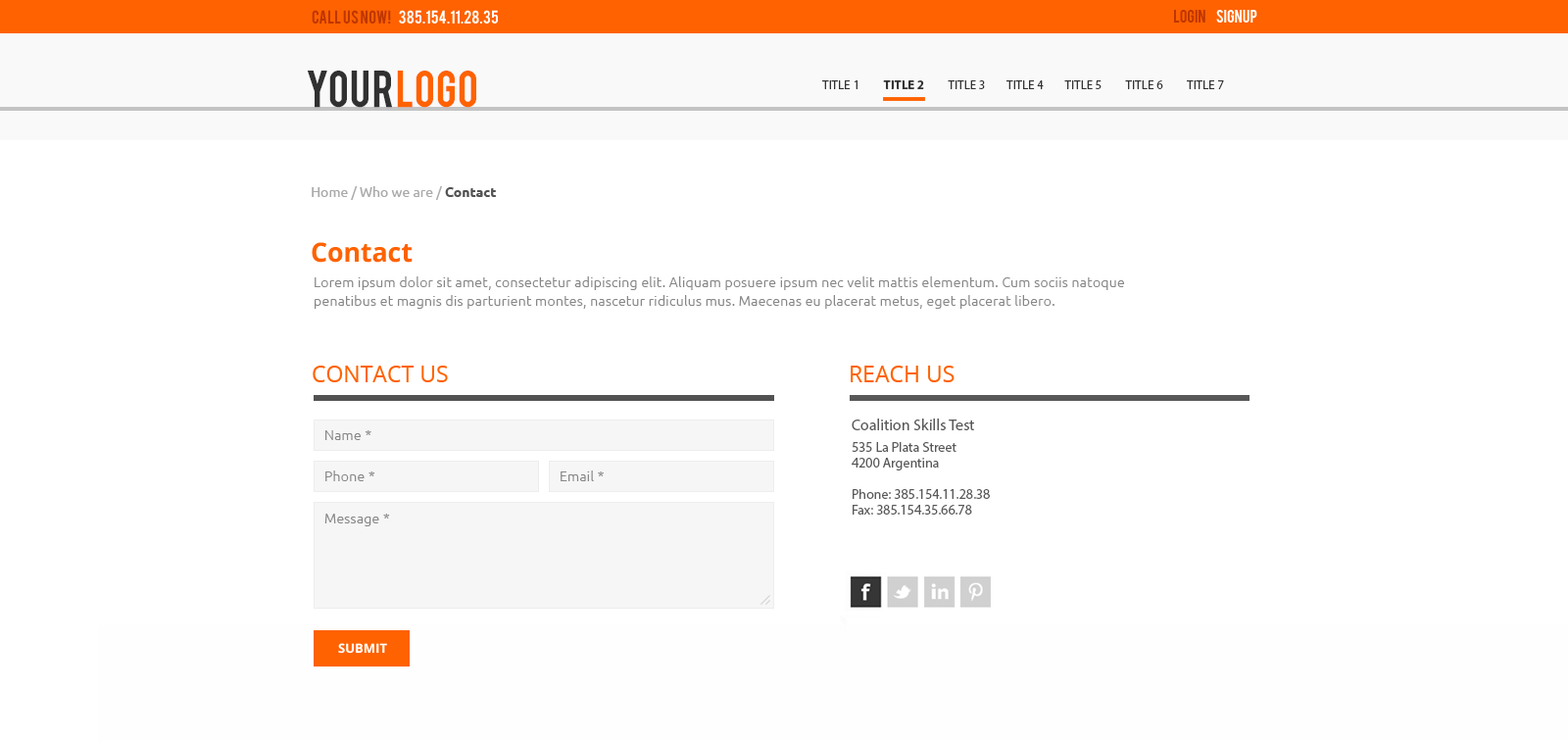
<style>
.page{position:relative;width:1568px;height:741px;background:#ffffff}
.page>*{position:absolute;margin:0}
.t1{font:14.5px "Bebas";letter-spacing:0.01em;color:#ffffff;text-transform:uppercase}
.t2{font:14.5px "Bebas";letter-spacing:0.01em;color:#be3600;text-transform:uppercase}
.t3{font:14.3px "Bebas";letter-spacing:0.01em;color:#ffffff;text-transform:uppercase}
.t4{font:14.3px "Bebas";letter-spacing:0.01em;color:#be3600;text-transform:uppercase}
.t5{font:40.3px "Bebas";letter-spacing:0.01em;color:#313131;text-transform:uppercase}
.t6{font:40.3px "Bebas";letter-spacing:0.01em;color:#ff6200;text-transform:uppercase}
.t7{font:12.7px "MyriadPro-Regular";color:#333333;text-transform:uppercase}
.t8{font:12.7px "MyriadPro-Bold";color:#333333;text-transform:uppercase}
.t9{font:13.7px "Ubuntu"}
.t10{font:13.7px "Ubuntu-Bold"}
.t11{font:26.4px "OpenSans-Bold";color:#ff6200}
.t12{font:13.7px/18.6px "Ubuntu-Light";letter-spacing:0.02em;color:#878787}
.t13{font:22.5px "OpenSans";color:#ff6200}
.t14{font:13.7px/15.7px "MyriadPro-Regular";color:#595959}
.t15{font:15.7px/5.9px "MyriadPro-Regular";color:#595959}
.t16{font:13.7px "Ubuntu-Light";letter-spacing:0.02em;color:#878787}
.t17{font:12.8px "OpenSans-Bold";color:#ffffff}
</style>
<div class="page">
<p class="t1" style="left:312px;top:10px;width:186px;height:14px"><span class="t2">CALL US NOW!     </span>385.154.11.28.35</p>
<p class="t3" style="left:1174px;top:10px;width:83px;height:13px"><span class="t4">           LOGIN </span>      SIGNUP</p>
<p class="t5" style="left:307px;top:71px;width:169px;height:37px">YOUR<span class="t6">LOGO</span></p>
<p class="t7" style="left:822px;top:80px;width:402px;height:9px">title 1         <span class="t8">title 2</span>         title 3        title 4        title 5         title 6         title 7</p>
<p class="t9" style="left:312px;top:186px;width:184px;height:14px">Home / Who we are / <span class="t10">Contact</span></p>
<p class="t11" style="left:312px;top:242px;width:101px;height:21px">Contact</p>
<p class="t12" style="left:315px;top:276px;width:809px;height:33px">Lorem ipsum dolor sit amet, consectetur adipiscing elit. Aliquam posuere ipsum nec velit mattis elementum. Cum sociis natoque <br>penatibus et magnis dis parturient montes, nascetur ridiculus mus. Maecenas eu placerat metus, eget placerat libero.</p>
<p class="t13" style="left:313px;top:366px;width:135px;height:16px">CONTACT US</p>
<p class="t13" style="left:851px;top:366px;width:104px;height:16px">REACH US</p>
<p class="t14" style="left:852px;top:418px;width:138px;height:96px"><span class="t15">Coalition Skills Test<br><br></span>535 La Plata Street<br>4200 Argentina<br><br>Phone: 385.154.11.28.38<br>Fax: 385.154.35.66.78</p>
<p class="t16" style="left:325px;top:430px;width:46px;height:10px">Name *</p>
<p class="t16" style="left:325px;top:470px;width:50px;height:11px">Phone *</p>
<p class="t16" style="left:561px;top:470px;width:43px;height:11px">Email *</p>
<p class="t16" style="left:324px;top:514px;width:66px;height:12px">Message *</p>
<p class="t17" style="left:338px;top:643px;width:49px;height:11px">SUBMIT</p>
</div>
